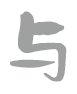
<style>
.page{position:relative;width:77px;height:94px;background:#ffffff}
.page>*{position:absolute;margin:0}
.t1{font:49px "AaDingXiangShouShu";letter-spacing:-0.4em;color:#9fa0a0;font-weight:bold;scale:1.14 1}
</style>
<div class="page">
<p class="t1" style="left:10px;top:11px;width:57px;height:71px">与</p>
</div>
